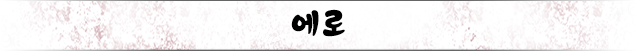
<style>
.page{position:relative;width:637px;height:51px;background:#ffffff}
.page>*{position:absolute;margin:0}
.t1{font:36.3px "KoreanKIES-R";color:#000000;font-weight:bold;scale:0.91 1}
</style>
<div class="page">
<p class="t1" style="left:291px;top:9px;width:54px;height:28px">에로</p>
</div>
